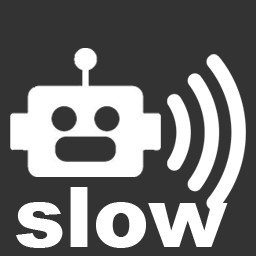
<style>
.page{position:relative;width:256px;height:256px;background:#333333}
.page>*{position:absolute;margin:0}
.t1{font:84px "Arial-Black";color:#ffffff}
</style>
<div class="page">
<p class="t1" style="left:16px;top:187px;width:212px;height:61px">slow</p>
</div>
